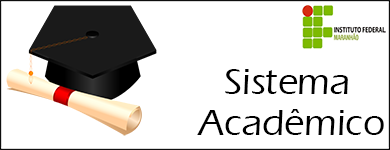
<style>
.page{position:relative;width:390px;height:150px;background:#ffffff}
.page>*{position:absolute;margin:0}
.t1{font:37.6px/41.4px "ErasITC-Medium";color:#000000}
</style>
<div class="page">
<p class="t1" style="left:197px;top:69px;width:187px;height:66px;text-align:center">Sistema <br>Acadêmico</p>
</div>
